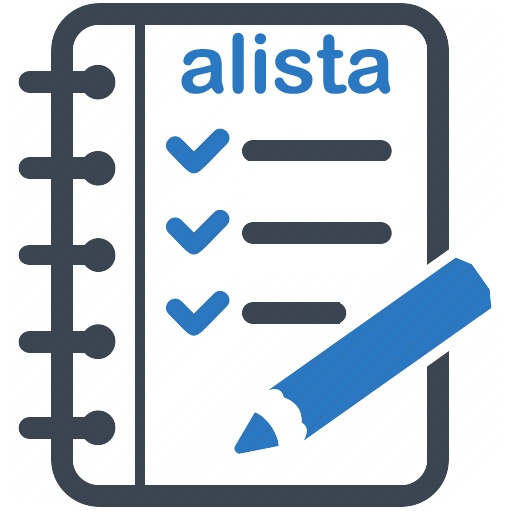
<style>
.page{position:relative;width:511px;height:511px;background:#ffffff}
.page>*{position:absolute;margin:0}
.t1{font:82px "ArialRoundedMTBold";color:#2b78c2}
</style>
<div class="page">
<p class="t1" style="left:181px;top:32px;width:210px;height:62px">alista</p>
</div>
